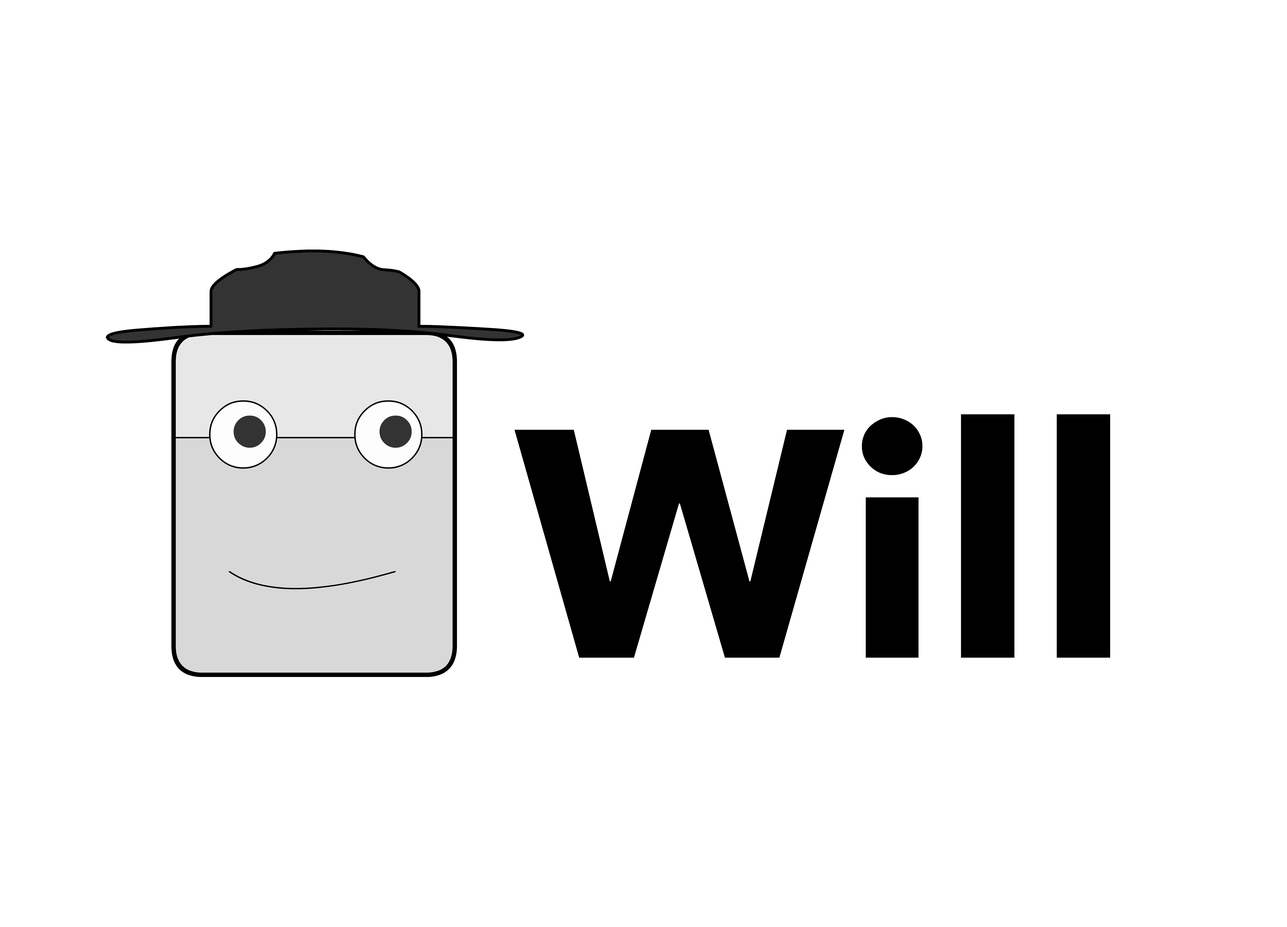
<style>
.page{position:relative;width:1287px;height:927px;background:#ffffff}
.page>*{position:absolute;margin:0}
.t1{font:321.7px "AvenirNext-Bold";color:#000000}
</style>
<div class="page">
<p class="t1" style="left:515px;top:414px;width:595px;height:243px">Will</p>
</div>
